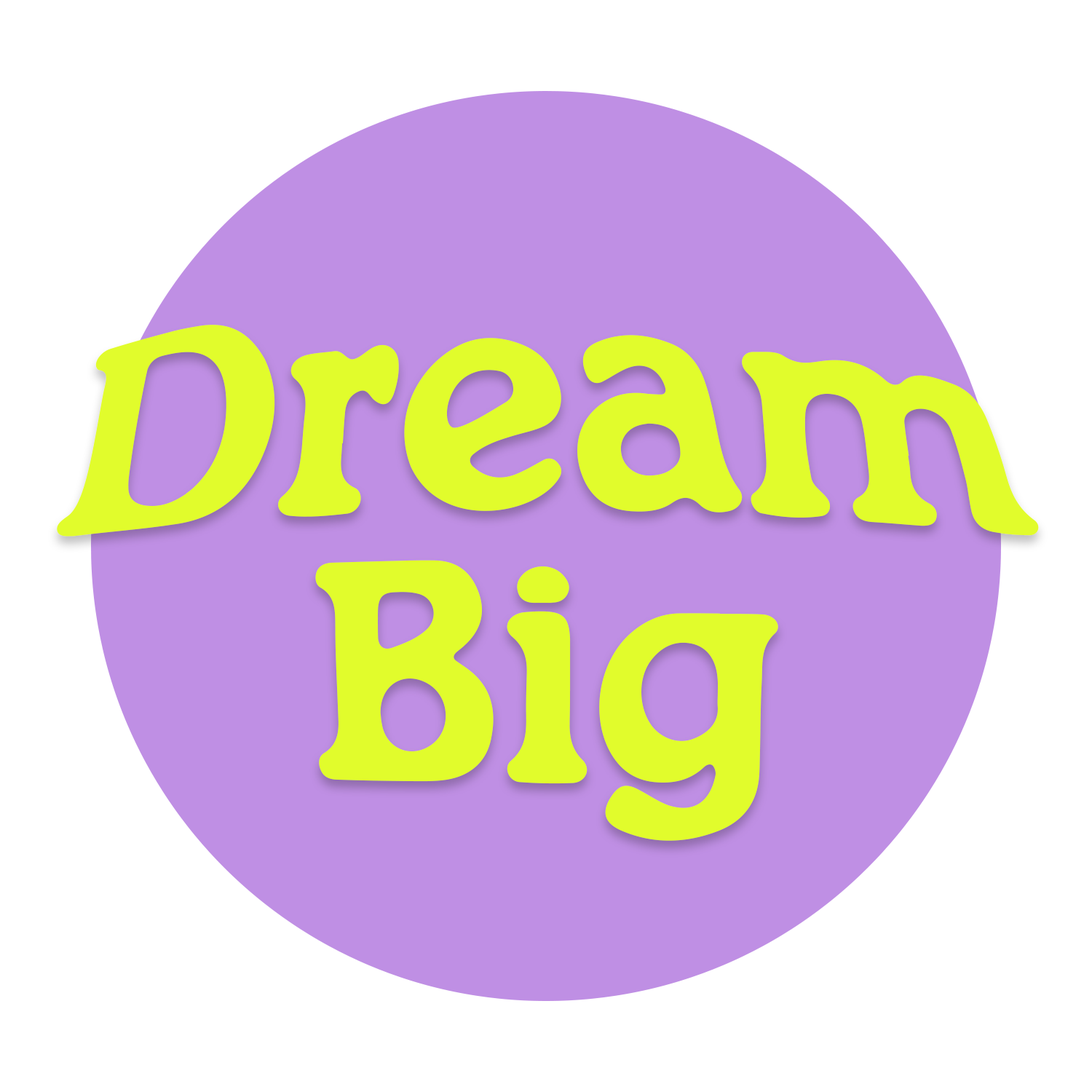
<style>
.page{position:relative;width:1092px;height:1092px;background:#ffffff}
.page>*{position:absolute;margin:0}
.t1{font:212.3px/182px "Generation1970";letter-spacing:-0.025em;color:#e1fc2c}
</style>
<div class="page">
<p class="t1" style="left:57px;top:325px;width:982px;height:516px;text-align:center">Dream Big</p>
</div>
